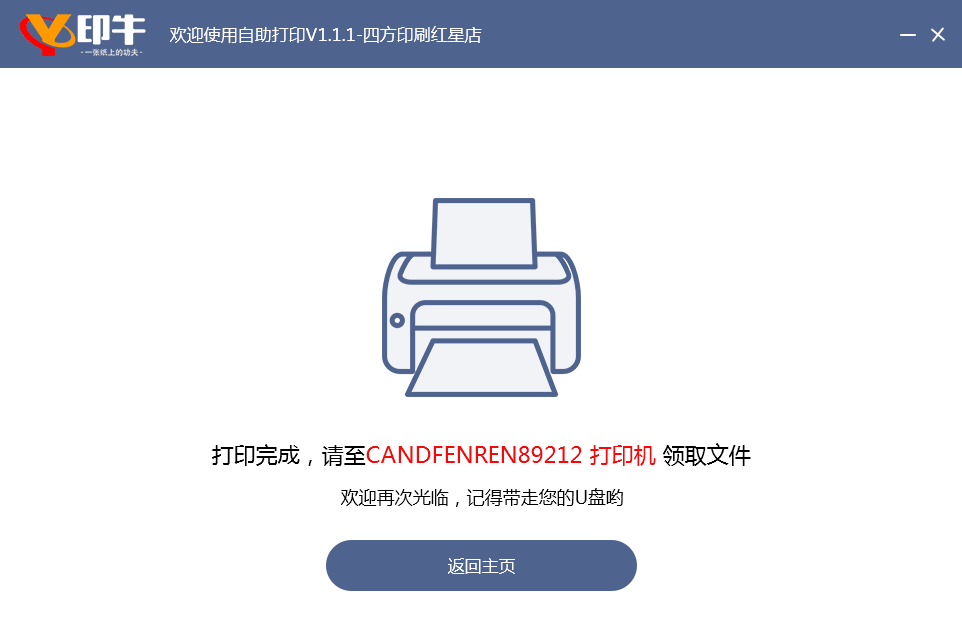
<style>
.page{position:relative;width:962px;height:643px;background:#ffffff}
.page>*{position:absolute;margin:0}
.t1{font:17px "MicrosoftYaHei";color:#ffffff}
.t2{font:22px "MicrosoftYaHei";color:#f40a0a}
.t3{font:22px "MicrosoftYaHei";color:#000000}
.t4{font:18px "MicrosoftYaHei";color:#000000}
</style>
<div class="page">
<p class="t1" style="left:170px;top:26px;width:312px;height:17px">欢迎使用自助打印V1.1.1-四方印刷红星店</p>
<p class="t2" style="left:212px;top:443px;width:539px;height:23px"><span class="t3">打印完成，请至</span>CANDFENREN89212 打印机 <span class="t3">领取文件</span></p>
<p class="t4" style="left:341px;top:488px;width:282px;height:19px">欢迎再次光临，记得带走您的U盘哟</p>
<p class="t1" style="left:448px;top:558px;width:67px;height:16px">返回主页</p>
</div>
